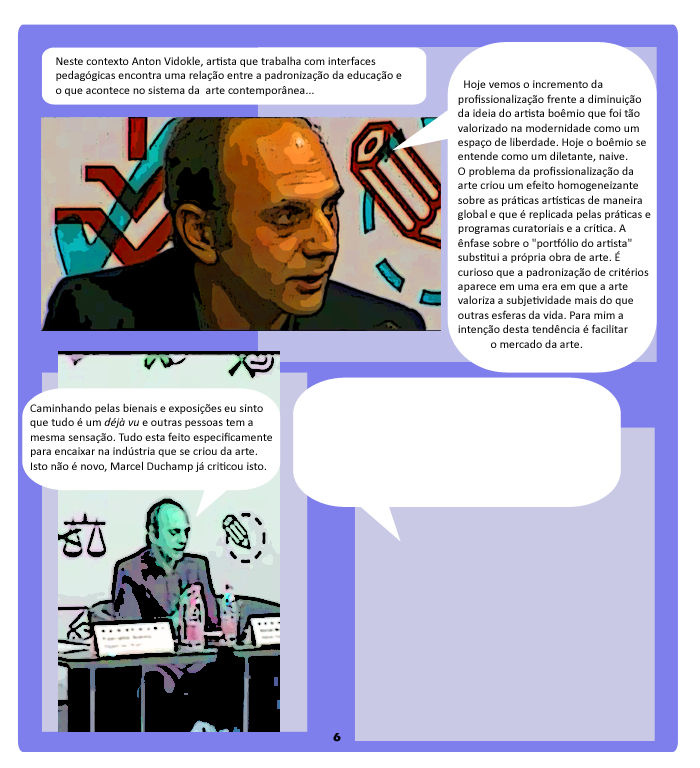
<style>
.page{position:relative;width:700px;height:768px;background:#ffffff}
.page>*{position:absolute;margin:0}
.t1{font:12px "Calibri";color:#000000}
.t2{font:12px "Calibri-Italic";color:#000000}
.t3{font:12px "ErasITC-Bold";color:#000000}
</style>
<div class="page">
<p class="t1" style="left:56px;top:56px;width:346px;height:40px">Neste contexto Anton Vidokle, artista que trabalha com interfaces <br>pedagógicas encontra uma relação entre a padronização da educação e <br>o que acontece no sistema da  arte contemporânea...</p>
<p class="t1" style="left:458px;top:79px;width:193px;height:269px">Hoje vemos o incremento da <br>profissionalização frente a diminuição <br>da ideia do artista boêmio que foi tão <br>valorizado na modernidade como um <br>espaço de liberdade. Hoje o boêmio se <br>entende como um diletante, naive. <br>O problema da profissionalização da <br>arte criou um efeito homogeneizante <br>sobre as práticas artísticas de maneira <br>global e que é replicada pelas práticas e <br>programas curatoriais e a crítica. A <br>ênfase sobre o "portfólio do artista" <br>substitui a própria obra de arte. É <br>curioso que a padronização de critérios <br>aparece em uma era em que a arte <br>valoriza a subjetividade mais do que <br>outras esferas da vida. Para mim a <br>intenção desta tendência é facilitar <br>            o mercado da arte.</p>
<p class="t1" style="left:30px;top:403px;width:242px;height:69px">Caminhando pelas bienais e exposições eu sinto <br>que tudo é um <span class="t2">déjà vu </span>e outras pessoas tem a <br>mesma sensação. Tudo esta feito especificamente <br>para encaixar na indústria que se criou da arte. <br>Isto não é novo, Marcel Duchamp já criticou isto.</p>
<p class="t3" style="left:333px;top:733px;width:8px;height:9px">6</p>
</div>
